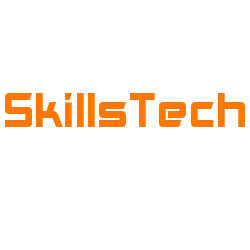
<style>
.page{position:relative;width:250px;height:250px;background:#ffffff}
.page>*{position:absolute;margin:0}
.t1{font:45.8px "Akashi";color:#fe7800}
</style>
<div class="page">
<p class="t1" style="left:5px;top:93px;width:240px;height:34px">SkillsTech</p>
</div>
